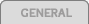
<style>
.page{position:relative;width:89px;height:24px;background:#dbdbdb}
.page>*{position:absolute;margin:0}
.t1{font:12px "Mandinga-Regular";color:#9d9c9c;font-weight:bold}
</style>
<div class="page">
<p class="t1" style="left:21px;top:8px;width:51px;height:10px">GENERAL</p>
</div>
